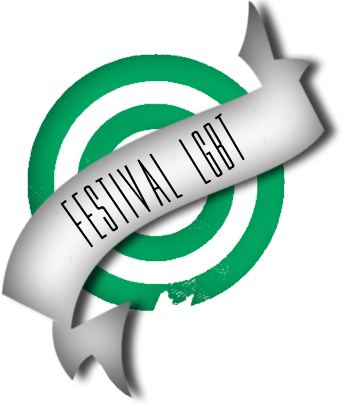
<style>
.page{position:relative;width:351px;height:411px;background:#ffffff}
.page>*{position:absolute;margin:0}
.t1{font:74px "MovieLetters";color:#000000}
</style>
<div class="page">
<p class="t1" style="left:60px;top:113px;width:185px;height:135px;rotate:-30deg">FESTIVAL LGBT</p>
</div>
